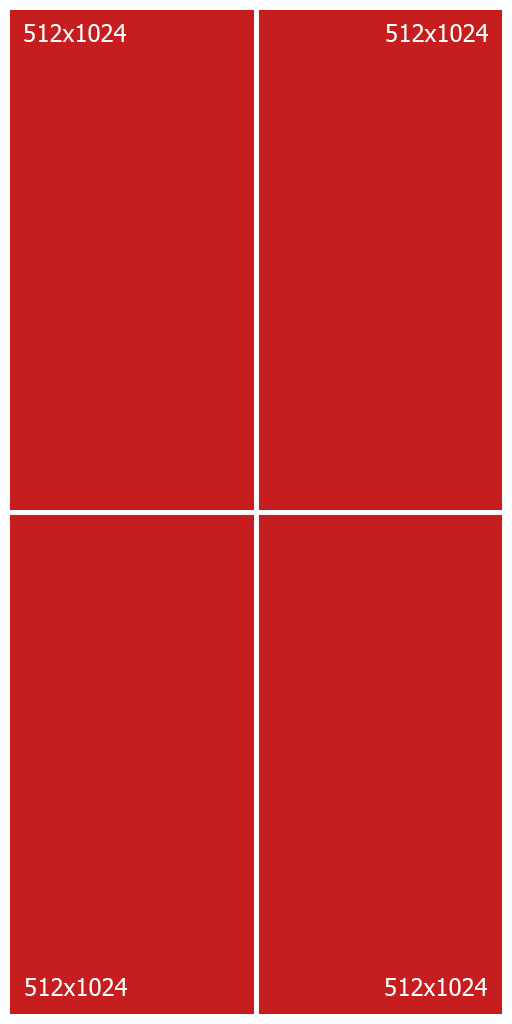
<style>
.page{position:relative;width:512px;height:1024px;background:#c61e1e}
.page>*{position:absolute;margin:0}
.t1{font:24px "Tahoma";color:#ffffff}
</style>
<div class="page">
<p class="t1" style="left:24px;top:24px;width:102px;height:18px">512x1024</p>
<p class="t1" style="left:386px;top:24px;width:102px;height:18px">512x1024</p>
<p class="t1" style="left:25px;top:978px;width:102px;height:18px">512x1024</p>
<p class="t1" style="left:385px;top:978px;width:102px;height:18px">512x1024</p>
</div>
